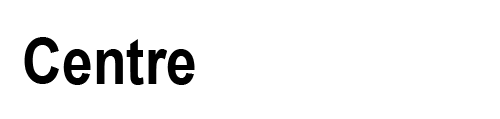
<style>
.page{position:relative;width:500px;height:119px;background:#ffffff}
.page>*{position:absolute;margin:0}
.t1{font:64px "Arial-BoldMT";color:#000000;scale:0.86 1}
</style>
<div class="page">
<p class="t1" style="left:24px;top:37px;width:171px;height:48px">Centre</p>
</div>
